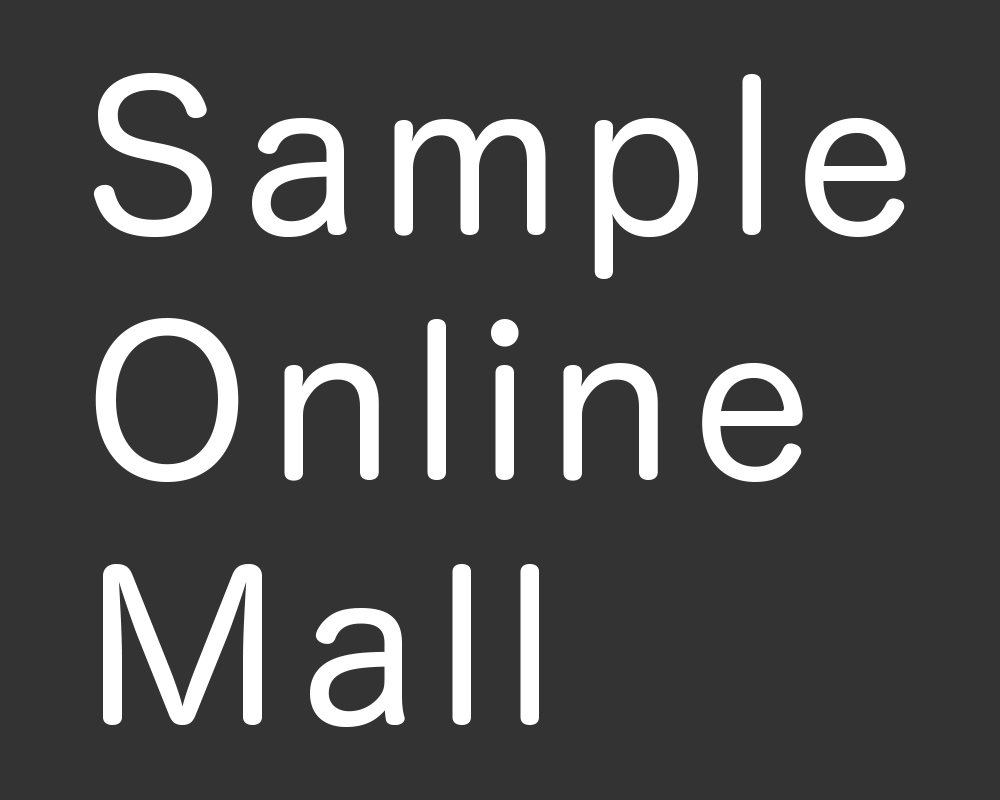
<style>
.page{position:relative;width:1000px;height:800px;background:#333333}
.page>*{position:absolute;margin:0}
.t1{font:204.2px "HiraMaruProN-W4";letter-spacing:0.1em;color:#ffffff}
</style>
<div class="page">
<p class="t1" style="left:93px;top:73px;width:813px;height:654px">Sample<br>Online<br>Mall</p>
</div>
